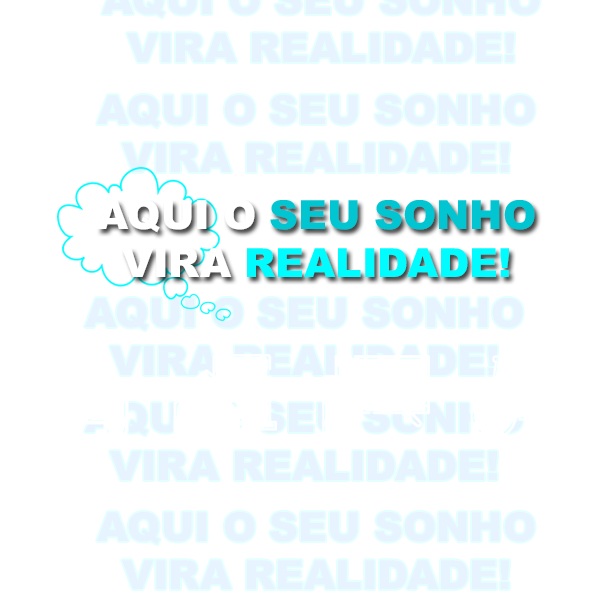
<style>
.page{position:relative;width:600px;height:600px;background:#ffffff}
.page>*{position:absolute;margin:0}
.t1{font:40.1px "Arial-Black";color:#e7f3ff}
.t2{font:40.1px "Arial-Black";color:#00fcff}
.t3{font:40.1px "Arial-Black";color:#ffffff}
.t4{font:40.1px "Arial-Black";color:#01c6d2}
</style>
<div class="page">
<p class="t1" style="left:97px;top:95px;width:438px;height:77px;text-align:center">AQUI O SEU SONHO VIRA REALIDADE!</p>
<p class="t2" style="left:97px;top:200px;width:438px;height:77px;text-align:center"><span class="t3">AQUI O </span><span class="t4">SEU SONHO </span><span class="t3">VIRA </span>REALIDADE!</p>
<p class="t1" style="left:97px;top:512px;width:438px;height:77px;text-align:center">AQUI O SEU SONHO VIRA REALIDADE!</p>
</div>
